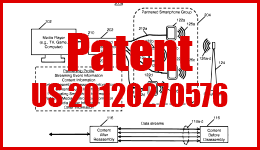
<style>
.page{position:relative;width:260px;height:150px;background:#ffffff}
.page>*{position:absolute;margin:0}
.t1{font:30px "Impact";color:#df0000}
.t2{font:48px "Impact";color:#df0000}
</style>
<div class="page">
<p class="t1" style="left:32px;top:33px;width:196px;height:74px;text-align:center"><span class="t2">Patent<br></span>US 20120270576</p>
</div>
